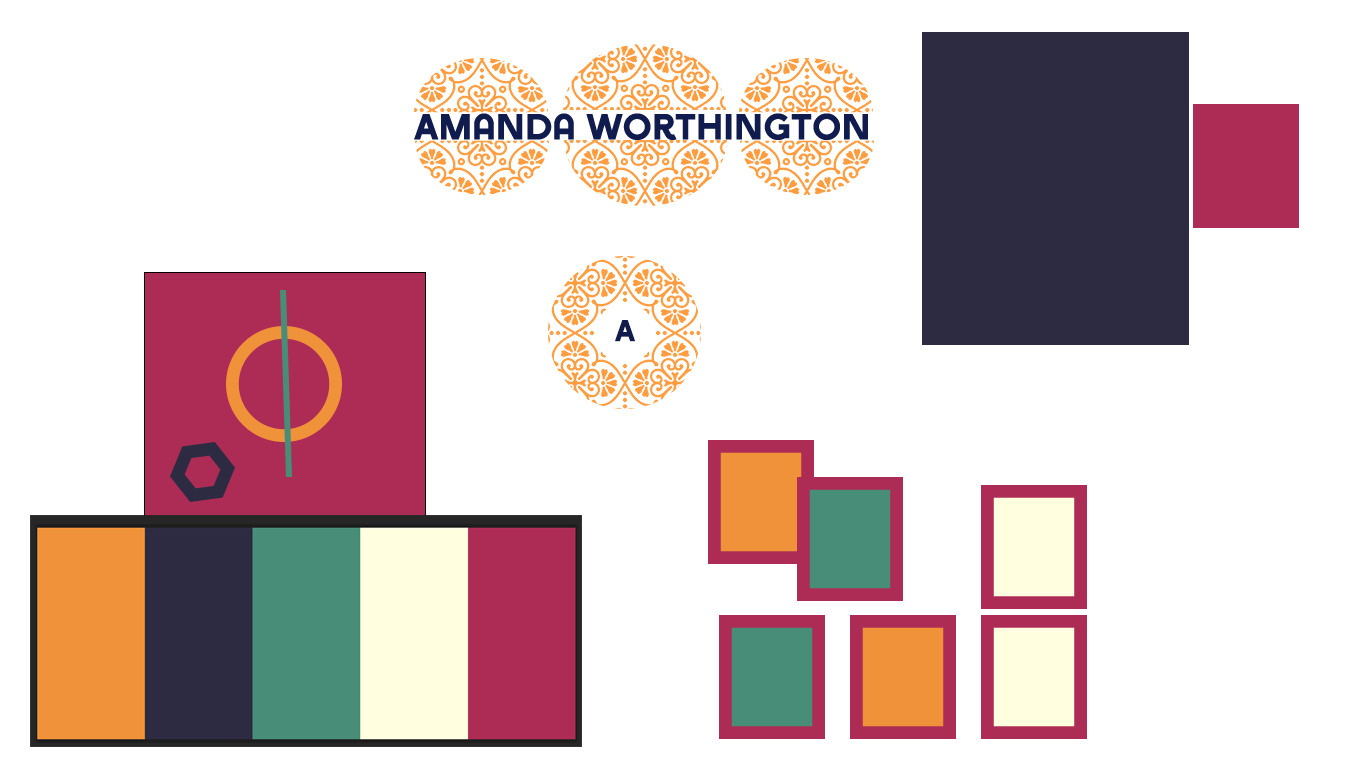
<style>
.page{position:relative;width:1366px;height:768px;background:#ffffff}
.page>*{position:absolute;margin:0}
.t1{font:36px "Arya-Single";color:#111c4e}
.t2{font:30px "Arya-Single";color:#111c4e}
</style>
<div class="page">
<p class="t1" style="left:414px;top:113px;width:454px;height:27px">Amanda worthington</p>
<p class="t2" style="left:615px;top:320px;width:21px;height:22px">A</p>
</div>
